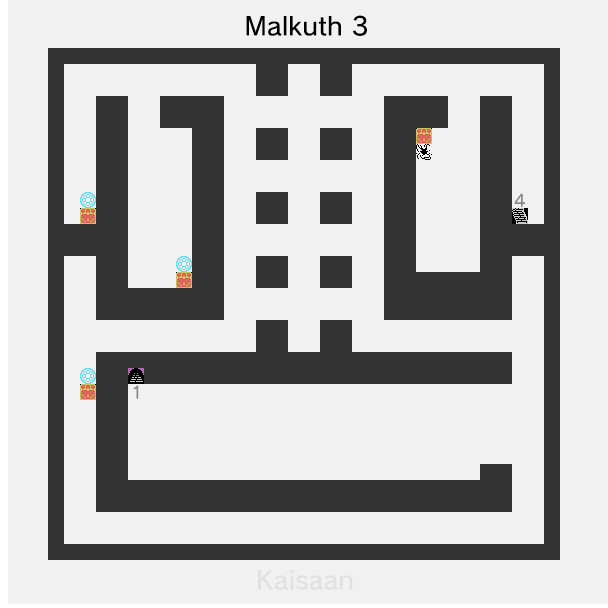
<style>
.page{position:relative;width:608px;height:608px;background:#f1f1f1}
.page>*{position:absolute;margin:0}
.t1{font:25px "nintendoNTLG-DB002";color:#000000}
.t2{font:16.7px "nintendoNTLG-DB002";color:#868787}
.t3{font:25px "nintendoNTLG-DB002";color:#e1e1e1}
</style>
<div class="page">
<p class="t1" style="left:246px;top:15px;width:121px;height:21px">Malkuth 3</p>
<p class="t2" style="left:514px;top:193px;width:11px;height:14px">4</p>
<p class="t2" style="left:133px;top:385px;width:6px;height:14px">1</p>
<p class="t3" style="left:258px;top:570px;width:95px;height:20px">Kaisaan</p>
</div>
